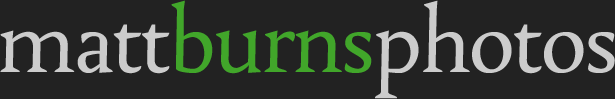
<style>
.page{position:relative;width:615px;height:99px;background:#222222}
.page>*{position:absolute;margin:0}
.t1{font:110.8px "Tallys";letter-spacing:-0.02em;color:#cccccc}
.t2{font:110.8px "Tallys";letter-spacing:-0.02em;color:#41a62a}
</style>
<div class="page">
<p class="t1" style="left:0px;top:0px;width:615px;height:99px">matt<span class="t2">burns</span>photos</p>
</div>
